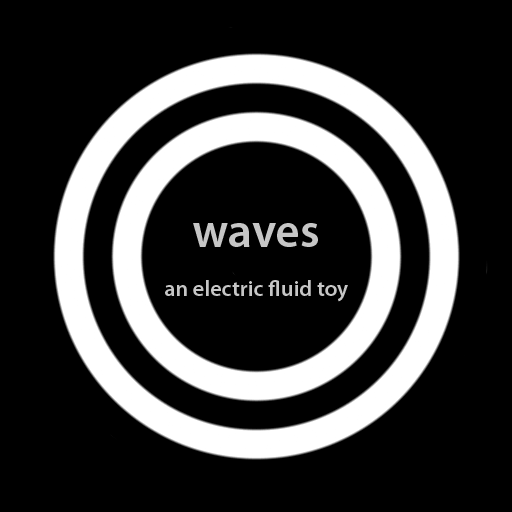
<style>
.page{position:relative;width:512px;height:512px;background:#000000}
.page>*{position:absolute;margin:0}
.t1{font:48px "MyriadPro-Semibold";color:#c6c6c6}
.t2{font:22.4px "MyriadPro-Semibold";color:#c6c6c6}
</style>
<div class="page">
<p class="t1" style="left:193px;top:223px;width:125px;height:24px">waves</p>
<p class="t2" style="left:165px;top:280px;width:183px;height:22px">an electric fluid toy</p>
</div>
